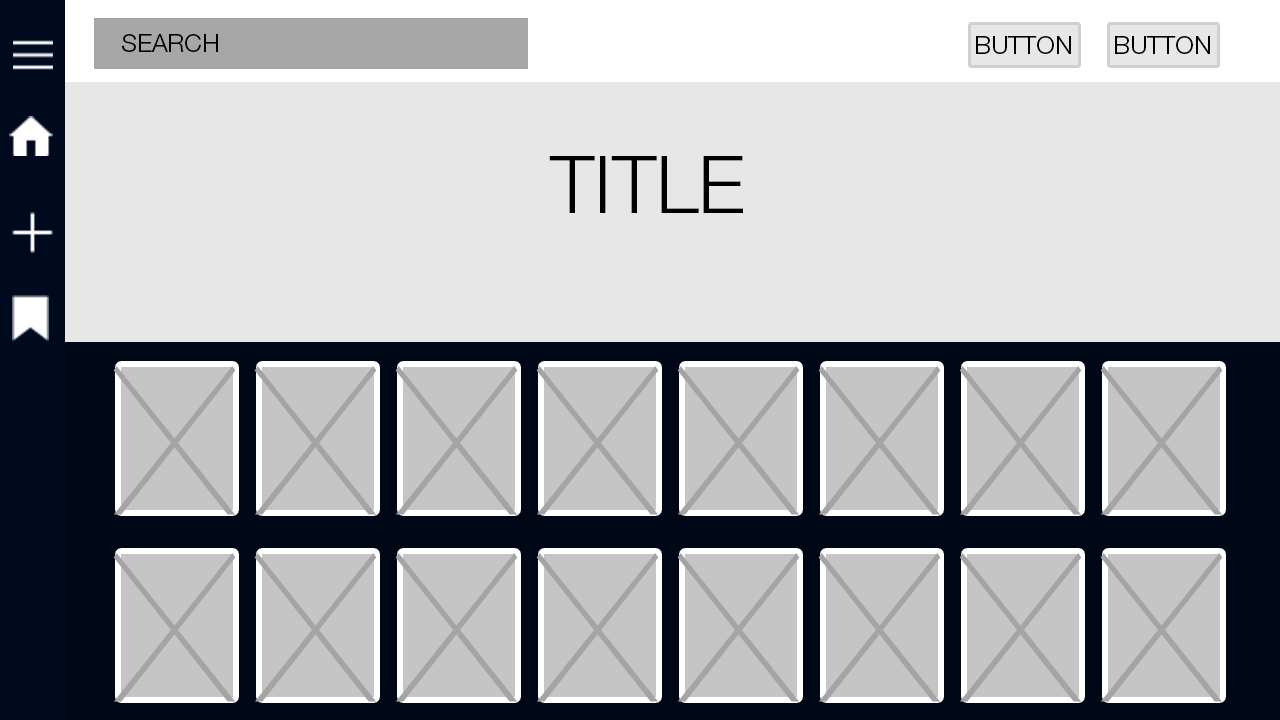
<style>
.page{position:relative;width:1280px;height:720px;background:#e7e7e7}
.page>*{position:absolute;margin:0}
.t1{font:25px "HelveticaNeueLTStd-Lt";color:#000000}
.t2{font:79.2px "HelveticaNeueLTStd-Lt";color:#000000}
</style>
<div class="page">
<p class="t1" style="left:122px;top:34px;width:96px;height:18px">SEARCH</p>
<p class="t1" style="left:976px;top:36px;width:95px;height:18px">BUTTON</p>
<p class="t1" style="left:1115px;top:36px;width:95px;height:18px">BUTTON</p>
<p class="t2" style="left:549px;top:156px;width:194px;height:57px">TITLE</p>
</div>
